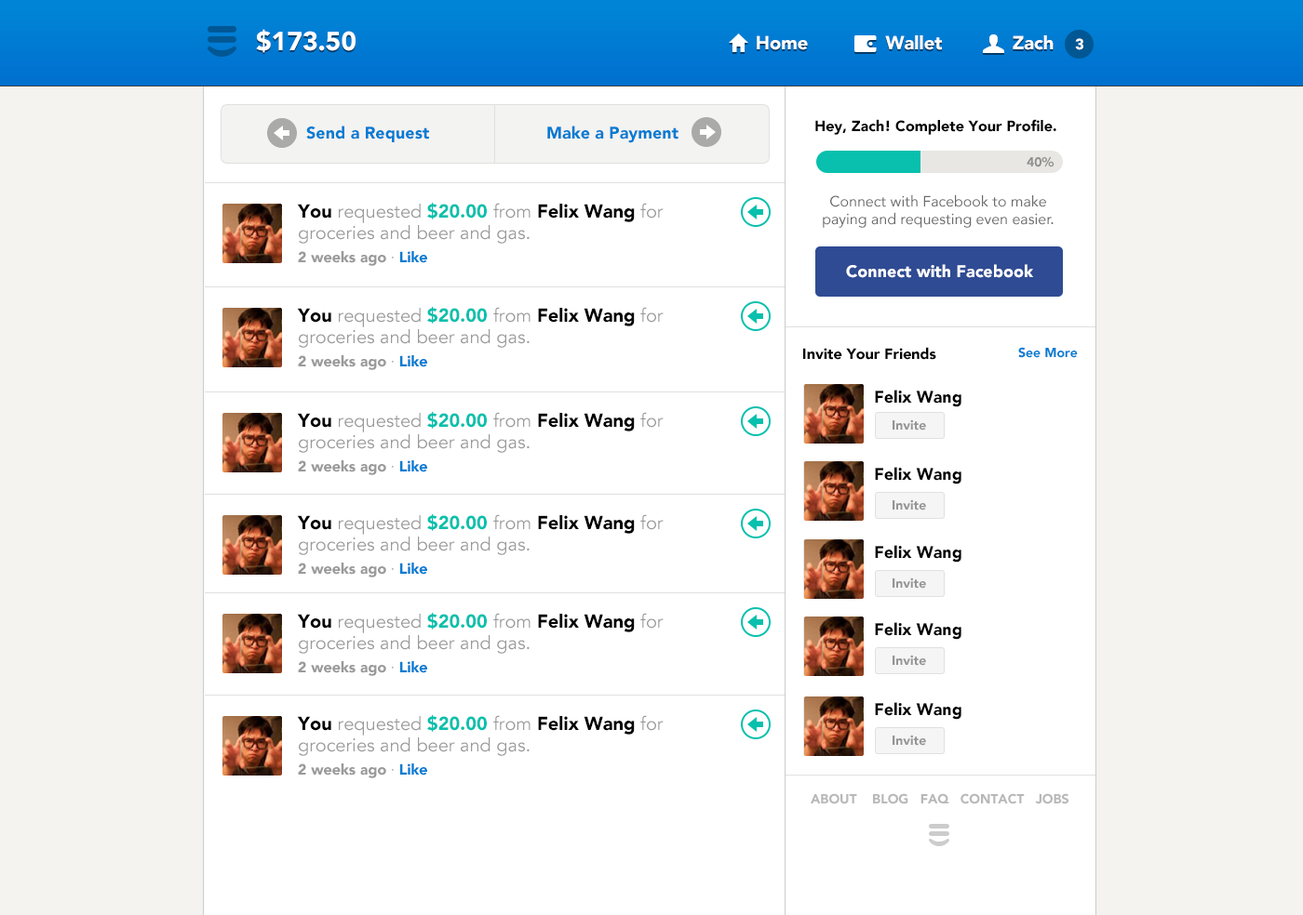
<style>
.page{position:relative;width:1303px;height:915px;background:#ffffff}
.page>*{position:absolute;margin:0}
.t1{font:26.1px "Avenir-Black";color:#ffffff}
.t2{font:18.6px "Avenir-Black";color:#ffffff}
.t3{font:14.9px "Avenir-Black";color:#ffffff}
.t4{font:16.7px "Avenir-Black";color:#007bd3}
.t5{font:14.9px "Avenir-Black";color:#000000}
.t6{font:13px "Avenir-Black";color:#929292}
.t7{font:14.9px "Avenir-Roman";color:#6b6b6b}
.t8{font:18.6px/10.2px "Avenir-Book";color:#9a9a9a}
.t9{font:18.6px/12.1px "Avenir-Black";color:#000000}
.t10{font:18.6px/12.1px "Avenir-Book";color:#9a9a9a}
.t11{font:18.6px/12.1px "Avenir-Black";color:#08c0ad}
.t12{font:14.9px/23.4px "Avenir-Black";color:#9a9a9a}
.t13{font:14.9px/23.4px "Avenir-Book";color:#9a9a9a}
.t14{font:14.9px/23.4px "Avenir-Black";color:#007bd3}
.t15{font:16.7px "Avenir-Black";color:#ffffff}
.t16{font:13px "Avenir-Black";color:#007cd3}
.t17{font:16.7px "Avenir-Black";color:#000000}
.t18{font:13px "Avenir-Black";color:#959595}
.t19{font:13px "Avenir-Black";color:#b8b8b8;text-transform:uppercase}
</style>
<div class="page">
<p class="t1" style="left:256px;top:29px;width:99px;height:24px">$173.50</p>
<p class="t2" style="left:756px;top:35px;width:52px;height:15px">Home</p>
<p class="t2" style="left:885px;top:35px;width:57px;height:15px">Wallet</p>
<p class="t2" style="left:1012px;top:35px;width:41px;height:15px">Zach</p>
<p class="t3" style="left:1075px;top:38px;width:8px;height:12px">3</p>
<p class="t4" style="left:306px;top:126px;width:123px;height:16px">Send a Request</p>
<p class="t4" style="left:547px;top:126px;width:131px;height:17px">Make a Payment</p>
<p class="t5" style="left:815px;top:119px;width:241px;height:16px">Hey, Zach! Complete Your Profile.</p>
<p class="t6" style="left:1026px;top:156px;width:28px;height:11px">40%</p>
<p class="t7" style="left:822px;top:194px;width:231px;height:34px;text-align:center">Connect with Facebook to make paying and requesting even easier.</p>
<p class="t8" style="left:297px;top:203px;width:366px;height:63px"><span class="t9">You </span><span class="t10">requested </span><span class="t11">$20.00 </span><span class="t10">from </span><span class="t9">Felix Wang</span><span class="t10"> for groceries </span>and beer and gas. <br><span class="t12">2 weeks ago</span><span class="t13"> · </span><span class="t14">Like</span></p>
<p class="t15" style="left:846px;top:264px;width:188px;height:14px">Connect with Facebook</p>
<p class="t8" style="left:297px;top:307px;width:366px;height:63px"><span class="t9">You </span><span class="t10">requested </span><span class="t11">$20.00 </span><span class="t10">from </span><span class="t9">Felix Wang</span><span class="t10"> for groceries </span>and beer and gas. <br><span class="t12">2 weeks ago</span><span class="t13"> · </span><span class="t14">Like</span></p>
<p class="t5" style="left:803px;top:347px;width:133px;height:13px">Invite Your Friends</p>
<p class="t16" style="left:1018px;top:347px;width:59px;height:11px">See More</p>
<p class="t17" style="left:875px;top:390px;width:86px;height:18px">Felix Wang</p>
<p class="t8" style="left:297px;top:412px;width:366px;height:63px"><span class="t9">You </span><span class="t10">requested </span><span class="t11">$20.00 </span><span class="t10">from </span><span class="t9">Felix Wang</span><span class="t10"> for groceries </span>and beer and gas. <br><span class="t12">2 weeks ago</span><span class="t13"> · </span><span class="t14">Like</span></p>
<p class="t18" style="left:892px;top:420px;width:34px;height:11px">Invite</p>
<p class="t17" style="left:875px;top:467px;width:86px;height:18px">Felix Wang</p>
<p class="t18" style="left:892px;top:500px;width:34px;height:11px">Invite</p>
<p class="t8" style="left:297px;top:514px;width:366px;height:64px"><span class="t9">You </span><span class="t10">requested </span><span class="t11">$20.00 </span><span class="t10">from </span><span class="t9">Felix Wang</span><span class="t10"> for groceries </span>and beer and gas. <br><span class="t12">2 weeks ago</span><span class="t13"> · </span><span class="t14">Like</span></p>
<p class="t17" style="left:875px;top:545px;width:86px;height:18px">Felix Wang</p>
<p class="t18" style="left:892px;top:578px;width:34px;height:11px">Invite</p>
<p class="t8" style="left:297px;top:613px;width:366px;height:63px"><span class="t9">You </span><span class="t10">requested </span><span class="t11">$20.00 </span><span class="t10">from </span><span class="t9">Felix Wang</span><span class="t10"> for groceries </span>and beer and gas. <br><span class="t12">2 weeks ago</span><span class="t13"> · </span><span class="t14">Like</span></p>
<p class="t17" style="left:875px;top:622px;width:86px;height:18px">Felix Wang</p>
<p class="t18" style="left:892px;top:655px;width:34px;height:11px">Invite</p>
<p class="t17" style="left:875px;top:702px;width:86px;height:18px">Felix Wang</p>
<p class="t8" style="left:297px;top:715px;width:366px;height:64px"><span class="t9">You </span><span class="t10">requested </span><span class="t11">$20.00 </span><span class="t10">from </span><span class="t9">Felix Wang</span><span class="t10"> for groceries </span>and beer and gas. <br><span class="t12">2 weeks ago</span><span class="t13"> · </span><span class="t14">Like</span></p>
<p class="t18" style="left:892px;top:735px;width:34px;height:11px">Invite</p>
<p class="t19" style="left:810px;top:794px;width:258px;height:11px">ABOUT    Blog   FAQ   Contact   Jobs</p>
</div>
